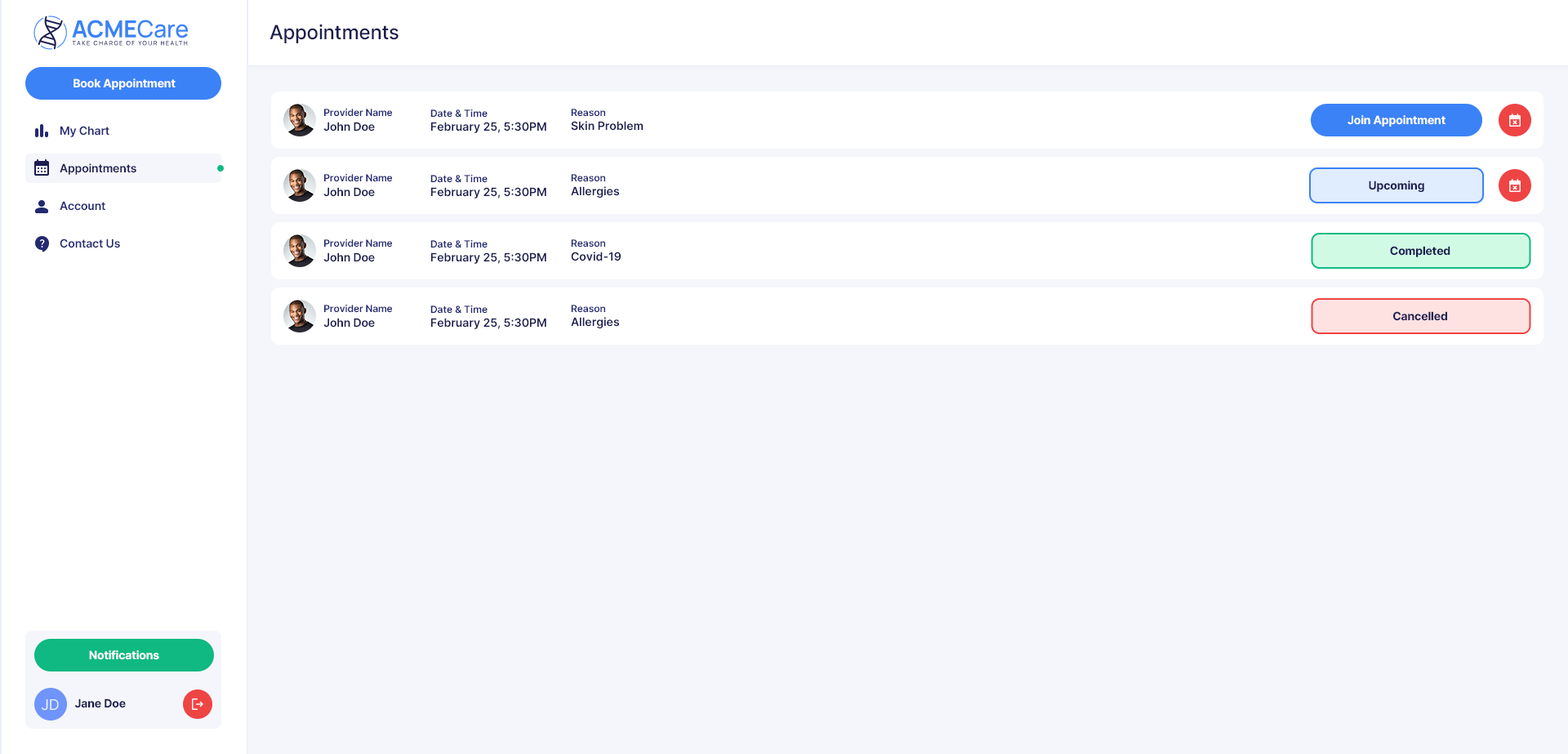
<style>
.page{position:relative;width:1568px;height:754px;background:#f5f6fb}
.page>*{position:absolute;margin:0}
.t1{font:19.6px "Inter-Medium";letter-spacing:-0.01em;color:#1c1e51}
.t2{font:11.4px "Inter-Bold";letter-spacing:-0.01em;color:#ffffff}
.t3{font:9.8px/14.7px "Inter-SemiBold";letter-spacing:-0.01em;color:#222971}
.t4{font:11.4px/14.7px "Inter-SemiBold";letter-spacing:-0.01em;color:#1c1e51}
.t5{font:11.4px "Inter-SemiBold";color:#1c1e51}
.t6{font:9.8px "Inter-SemiBold";color:#222971}
.t7{font:11.4px "Inter-SemiBold";letter-spacing:-0.01em;color:#222971}
.t8{font:11.4px "Inter-SemiBold";letter-spacing:-0.01em;color:#1c1e51}
.t9{font:11.4px "Inter-Bold";letter-spacing:-0.01em;color:#1c1e51}
.t10{font:14.7px "Inter-Regular";letter-spacing:-0.01em;color:#ffffff}
</style>
<div class="page">
<p class="t1" style="left:270px;top:24px;width:129px;height:19px">Appointments</p>
<p class="t2" style="left:74px;top:78px;width:102px;height:12px">Book Appointment</p>
<p class="t3" style="left:323px;top:108px;width:69px;height:23px">Provider Name<br><span class="t4">John Doe</span></p>
<p class="t5" style="left:430px;top:109px;width:116px;height:24px"><span class="t6">Date &amp; Time<br></span>February 25, 5:30PM</p>
<p class="t5" style="left:571px;top:109px;width:73px;height:22px"><span class="t6">Reason<br></span>Skin Problem</p>
<p class="t7" style="left:60px;top:126px;width:49px;height:11px">My Chart</p>
<p class="t2" style="left:1348px;top:115px;width:98px;height:12px">Join Appointment</p>
<p class="t8" style="left:60px;top:163px;width:76px;height:12px">Appointments</p>
<p class="t3" style="left:323px;top:173px;width:69px;height:24px">Provider Name<br><span class="t4">John Doe</span></p>
<p class="t5" style="left:430px;top:174px;width:116px;height:24px"><span class="t6">Date &amp; Time<br></span>February 25, 5:30PM</p>
<p class="t5" style="left:571px;top:174px;width:49px;height:24px"><span class="t6">Reason<br></span>Allergies</p>
<p class="t9" style="left:1369px;top:180px;width:55px;height:12px">Upcoming</p>
<p class="t7" style="left:60px;top:201px;width:45px;height:10px">Account</p>
<p class="t7" style="left:60px;top:238px;width:60px;height:10px">Contact Us</p>
<p class="t3" style="left:323px;top:238px;width:69px;height:24px">Provider Name<br><span class="t4">John Doe</span></p>
<p class="t5" style="left:430px;top:239px;width:116px;height:25px"><span class="t6">Date &amp; Time<br></span>February 25, 5:30PM</p>
<p class="t5" style="left:571px;top:239px;width:50px;height:22px"><span class="t6">Reason<br></span>Covid-19</p>
<p class="t9" style="left:1390px;top:246px;width:60px;height:11px">Completed</p>
<p class="t3" style="left:323px;top:304px;width:69px;height:23px">Provider Name<br><span class="t4">John Doe</span></p>
<p class="t5" style="left:430px;top:305px;width:116px;height:24px"><span class="t6">Date &amp; Time<br></span>February 25, 5:30PM</p>
<p class="t5" style="left:571px;top:305px;width:49px;height:23px"><span class="t6">Reason<br></span>Allergies</p>
<p class="t9" style="left:1393px;top:311px;width:54px;height:10px">Cancelled</p>
<p class="t2" style="left:89px;top:650px;width:70px;height:10px">Notifications</p>
<p class="t10" style="left:42px;top:699px;width:17px;height:11px;opacity:0.8">JD</p>
<p class="t9" style="left:74px;top:698px;width:52px;height:10px">Jane Doe</p>
</div>
